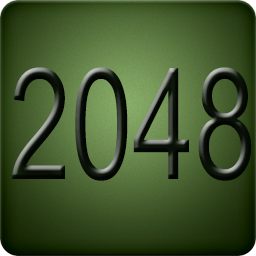
<style>
.page{position:relative;width:256px;height:256px}
.page>*{position:absolute;margin:0}
.t1{font:154.7px "ArialMT";scale:0.72 1}
</style>
<div class="page">
<p class="t1" style="left:12px;top:67px;width:240px;height:114px">2048</p>
</div>
